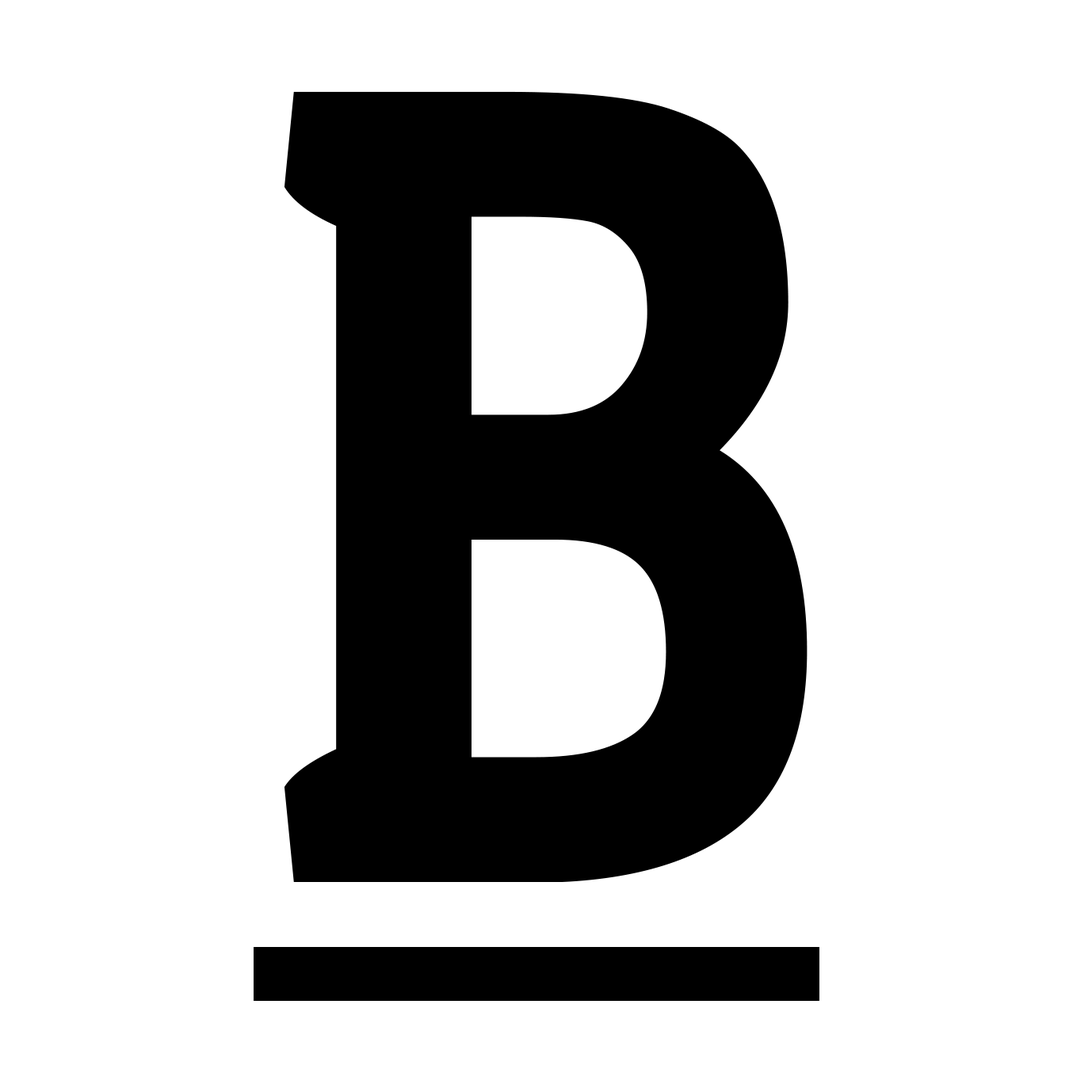
<style>
.page{position:relative;width:1092px;height:1092px;background:#ffffff}
.page>*{position:absolute;margin:0}
.t1{font:1145.4px "PatuaOne-Regular";letter-spacing:0.075em;color:#000000;scale:0.82 1}
</style>
<div class="page">
<p class="t1" style="left:284px;top:91px;width:523px;height:791px">B</p>
</div>
